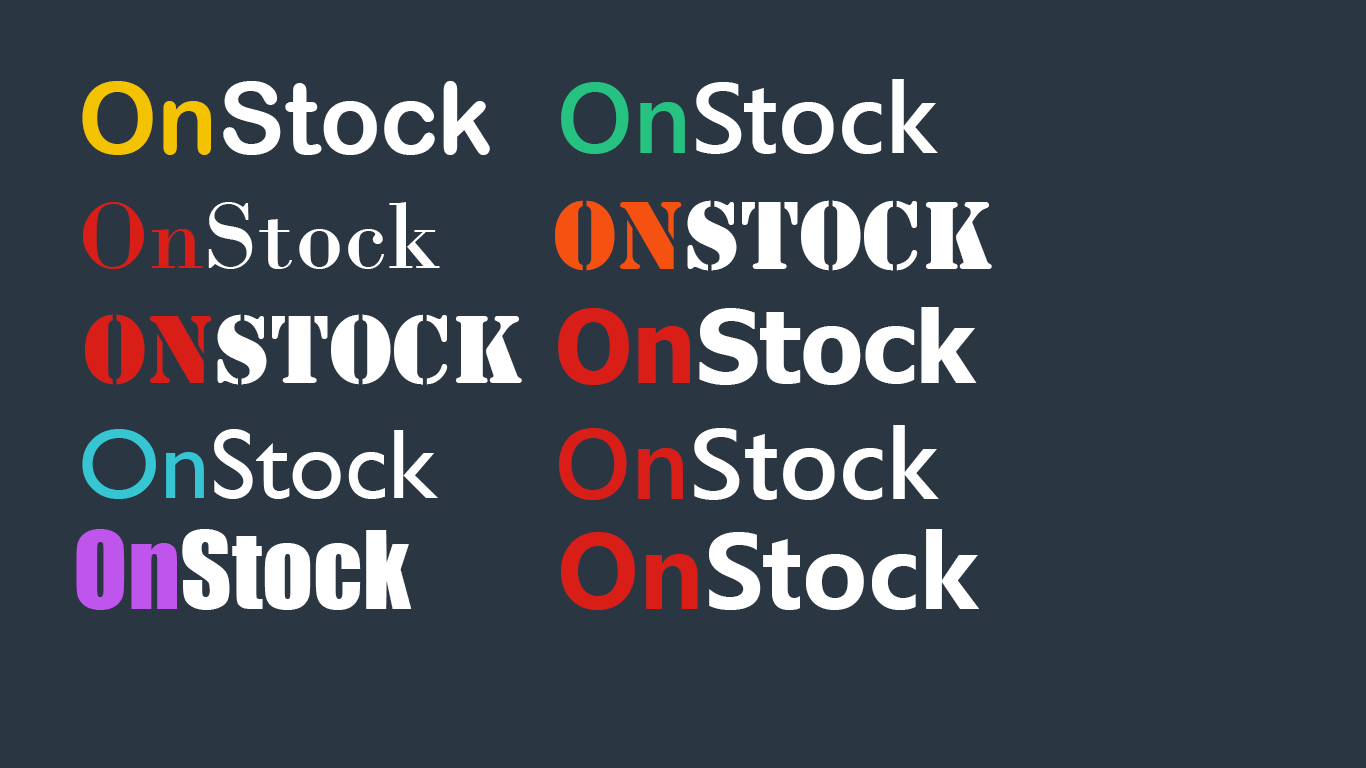
<style>
.page{position:relative;width:1366px;height:768px;background:#2b3643}
.page>*{position:absolute;margin:0}
.t1{font:100px "ArialRoundedMTBold";color:#ffffff}
.t2{font:100px "ArialRoundedMTBold";color:#f3c200}
.t3{font:100px "SegoeUI-Semibold";color:#ffffff}
.t4{font:100px "SegoeUI-Semibold";color:#26c281}
.t5{font:100px "BodoniMT";color:#ffffff}
.t6{font:100px "BodoniMT";color:#d91e18}
.t7{font:100px "Stencil";color:#ffffff}
.t8{font:100px "Stencil";color:#f55211}
.t9{font:100px "Stencil";color:#d91e18}
.t10{font:100px "Tahoma-Bold";color:#ffffff}
.t11{font:100px "Tahoma-Bold";color:#d91e18}
.t12{font:100px "YuGothicUI-Bold";color:#ffffff}
.t13{font:100px "YuGothicUI-Bold";color:#d91e18}
.t14{font:100px "GillSansMT";color:#ffffff}
.t15{font:100px "GillSansMT";color:#36c6d3}
.t16{font:100px "Impact";color:#ffffff}
.t17{font:100px "Impact";color:#bf55ec}
.t18{font:100px "MicrosoftYaHeiUI-Bold";color:#ffffff}
.t19{font:100px "MicrosoftYaHeiUI-Bold";color:#d91e18}
</style>
<div class="page">
<p class="t1" style="left:82px;top:81px;width:408px;height:74px"><span class="t2">On</span>Stock</p>
<p class="t3" style="left:561px;top:79px;width:377px;height:75px"><span class="t4">On</span>Stock</p>
<p class="t5" style="left:83px;top:202px;width:357px;height:67px"><span class="t6">On</span>Stock</p>
<p class="t7" style="left:555px;top:200px;width:437px;height:71px"><span class="t8">On</span>Stock</p>
<p class="t7" style="left:85px;top:314px;width:437px;height:71px"><span class="t9">On</span>Stock</p>
<p class="t10" style="left:558px;top:307px;width:419px;height:78px"><span class="t11">On</span>Stock</p>
<p class="t12" style="left:559px;top:425px;width:380px;height:75px"><span class="t13">On</span>Stock</p>
<p class="t14" style="left:82px;top:429px;width:356px;height:70px"><span class="t15">On</span>Stock</p>
<p class="t16" style="left:76px;top:529px;width:336px;height:81px"><span class="t17">On</span>Stock</p>
<p class="t18" style="left:561px;top:529px;width:418px;height:81px"><span class="t19">On</span>Stock</p>
</div>
